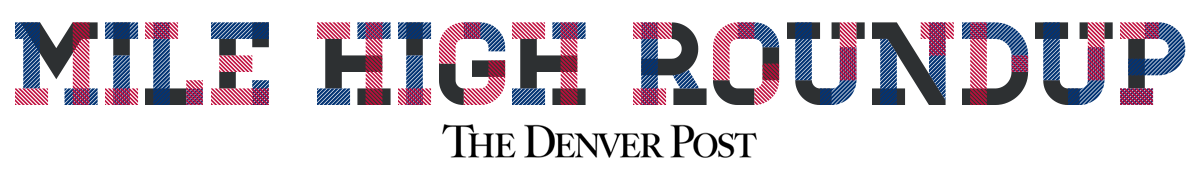
<style>
.page{position:relative;width:1200px;height:175px;background:#ffffff}
.page>*{position:absolute;margin:0}
.t1{font:28.4px "Homestead-Two";color:#023373}
.t2{font:28.4px "Homestead-Three";color:#bf0b3b}
.t3{font:28.4px "Homestead-One";color:#2d3032}
</style>
<div class="page">
<p class="t1" style="left:15px;top:22px;width:1171px;height:83px">MILE HIGH ROUNDUP</p>
<p class="t2" style="left:15px;top:22px;width:1144px;height:83px">MILE HIGH ROUNDUP</p>
<p class="t3" style="left:20px;top:22px;width:1125px;height:83px">MILE HIGH ROUNDUP</p>
</div>
